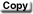
<style>
.page{position:relative;width:33px;height:14px;background:#ffffff}
.page>*{position:absolute;margin:0}
.t1{font:10px "Helvetica-Bold";color:#000000}
</style>
<div class="page">
<p class="t1" style="left:3px;top:1px;width:25px;height:10px">Copy</p>
</div>
